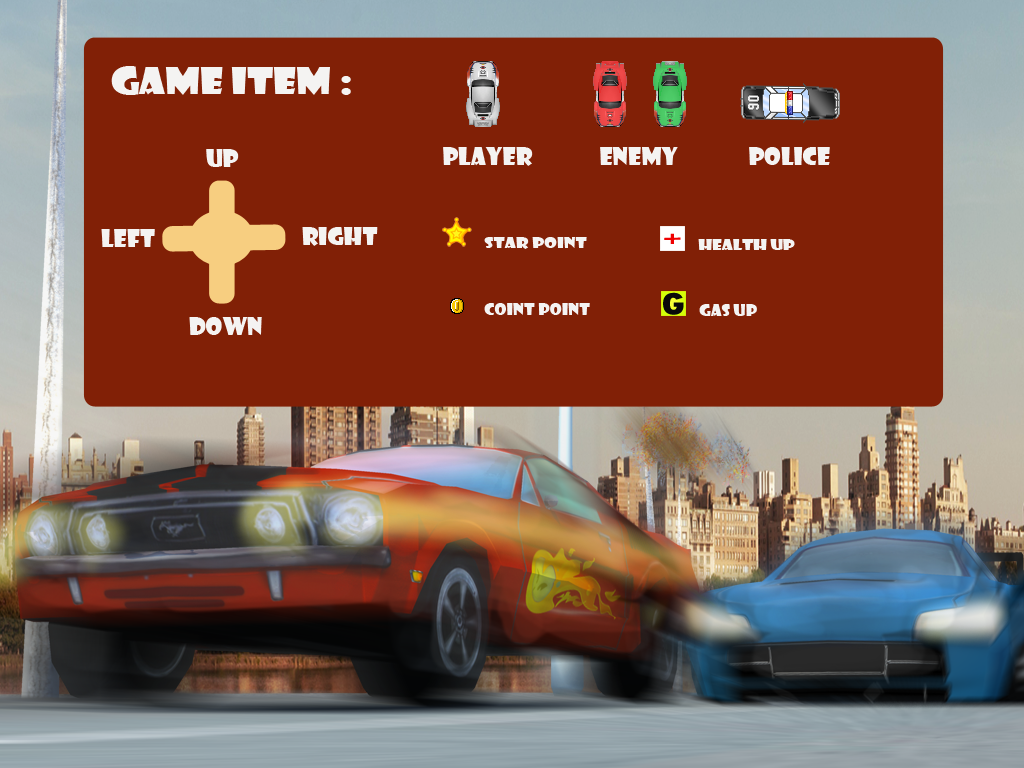
<style>
.page{position:relative;width:1024px;height:768px;background:#812006}
.page>*{position:absolute;margin:0}
.t1{font:35.6px "ShowcardGothic-Reg";color:#f4f3f2;scale:1.18 1}
.t2{font:24px "ShowcardGothic-Reg";color:#f4f3f2}
.t3{font:13.8px "ShowcardGothic-Reg";color:#f4f3f2;scale:1.32 1}
.t4{font:14.3px "ShowcardGothic-Reg";color:#f4f3f2;scale:1.24 1}
.t5{font:16.1px "ShowcardGothic-Reg";color:#f4f3f2;scale:1.07 1}
</style>
<div class="page">
<p class="t1" style="left:111px;top:66px;width:240px;height:29px">game item :</p>
<p class="t2" style="left:206px;top:149px;width:33px;height:18px">up</p>
<p class="t2" style="left:443px;top:147px;width:90px;height:19px">player</p>
<p class="t2" style="left:600px;top:147px;width:78px;height:18px">enemy</p>
<p class="t2" style="left:749px;top:147px;width:81px;height:18px">police</p>
<p class="t2" style="left:101px;top:229px;width:54px;height:18px">left</p>
<p class="t2" style="left:302px;top:227px;width:76px;height:19px">right</p>
<p class="t3" style="left:484px;top:237px;width:103px;height:12px">star point</p>
<p class="t4" style="left:698px;top:239px;width:97px;height:11px">health up</p>
<p class="t5" style="left:484px;top:303px;width:106px;height:12px">coint point</p>
<p class="t5" style="left:699px;top:304px;width:58px;height:12px">gas up</p>
<p class="t2" style="left:189px;top:317px;width:73px;height:18px">Down</p>
</div>
